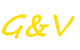
<style>
.page{position:relative;width:80px;height:50px;background:#ffffff}
.page>*{position:absolute;margin:0}
.t1{font:29.2px "SegoeScript-Bold";color:#ffdd00;font-style:italic}
</style>
<div class="page">
<p class="t1" style="left:1px;top:14px;width:74px;height:25px">G&amp;V</p>
</div>
